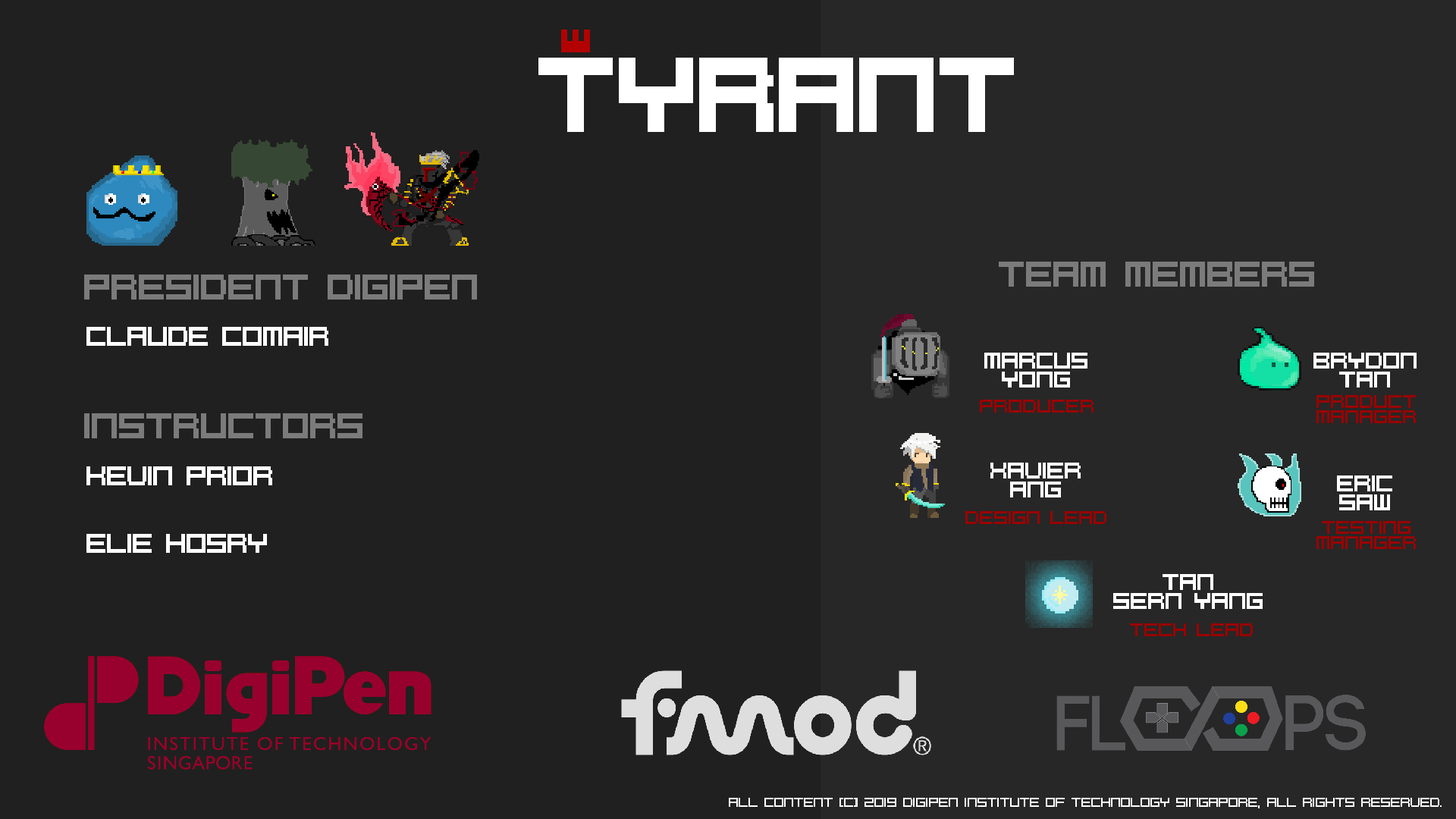
<style>
.page{position:relative;width:1456px;height:819px;background:#202020}
.page>*{position:absolute;margin:0}
.t1{font:25.3px "PixelCaps!";color:#7b7b7b}
.t2{font:19px "PixelCaps!";color:#ffffff}
.t3{font:15.8px "PixelCaps!";color:#ffffff}
.t4{font:12.6px "PixelCaps!";color:#9b0101}
.t5{font:9.1px "PixelCaps!";color:#ffffff}
</style>
<div class="page">
<p class="t1" style="left:999px;top:262px;width:315px;height:25px">Team members</p>
<p class="t1" style="left:84px;top:275px;width:393px;height:25px">president DIGIPEN</p>
<p class="t2" style="left:86px;top:327px;width:242px;height:19px">claude comair</p>
<p class="t3" style="left:984px;top:353px;width:103px;height:35px;text-align:center">marcus<br>yong</p>
<p class="t3" style="left:1313px;top:353px;width:104px;height:35px;text-align:center">Brydon<br>Tan</p>
<p class="t4" style="left:980px;top:400px;width:114px;height:13px">producer</p>
<p class="t4" style="left:1316px;top:395px;width:100px;height:28px;text-align:center">product<br>manager</p>
<p class="t1" style="left:84px;top:413px;width:278px;height:25px">instructors</p>
<p class="t2" style="left:86px;top:466px;width:186px;height:19px">kevin prior</p>
<p class="t3" style="left:990px;top:463px;width:91px;height:34px;text-align:center">Xavier<br>ang</p>
<p class="t3" style="left:1337px;top:475px;width:55px;height:35px;text-align:center">ERIC<br>saw</p>
<p class="t4" style="left:965px;top:511px;width:141px;height:13px">Design Lead</p>
<p class="t4" style="left:1316px;top:521px;width:100px;height:28px;text-align:center">Testing<br>manager</p>
<p class="t2" style="left:86px;top:534px;width:181px;height:19px">elie hosry</p>
<p class="t3" style="left:1113px;top:574px;width:150px;height:35px;text-align:center">TAN<br>Sern Yang</p>
<p class="t4" style="left:1130px;top:623px;width:123px;height:13px">tech lead</p>
<p class="t5" style="left:729px;top:798px;width:713px;height:10px">All content (c) 2019 Digipen Institute of Technology Singapore, all rights reserved.</p>
</div>
